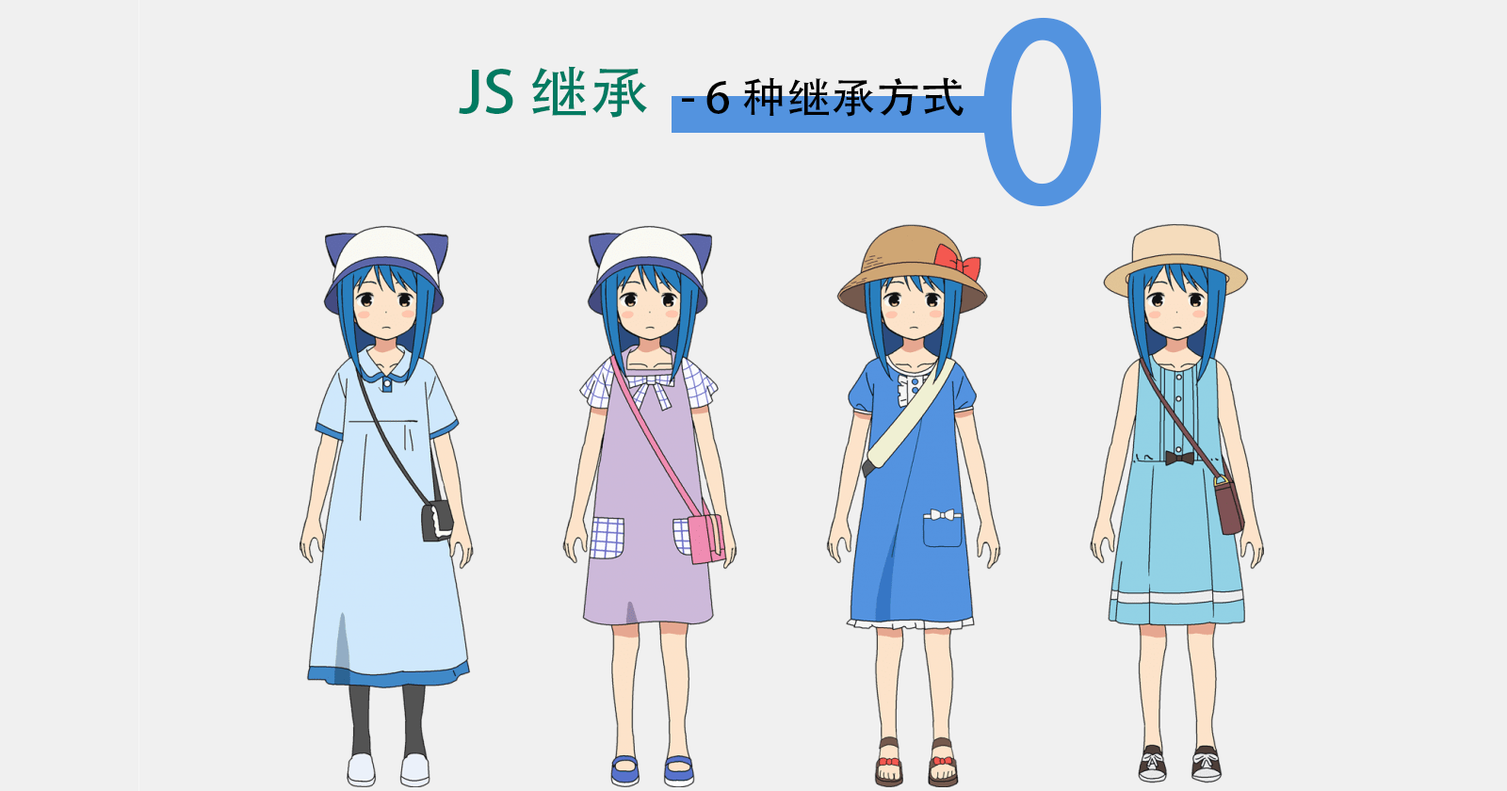
<style>
.page{position:relative;width:1507px;height:791px;background:#f0f0f0}
.page>*{position:absolute;margin:0}
.t1{font:242.1px "AdobeHeitiStd-Regular";color:#5393df}
.t2{font:41.9px "AdobeHeitiStd-Regular";color:#000000;scale:1.07 1}
.t3{font:56.5px "AdobeHeitiStd-Regular";color:#007a61;scale:1.07 1}
</style>
<div class="page">
<p class="t1" style="left:983px;top:17px;width:118px;height:190px">0</p>
<p class="t2" style="left:459px;top:66px;width:505px;height:52px"><span class="t3">JS 继承  </span> - 6种继承方式</p>
</div>
